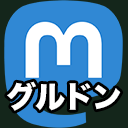
<style>
.page{position:relative;width:128px;height:128px;background:#3088d4}
.page>*{position:absolute;margin:0}
.t1{font:30px "HiraKakuStdN-W8";letter-spacing:-0.05em;color:#ffffff}
</style>
<div class="page">
<p class="t1" style="left:7px;top:81px;width:114px;height:30px">グルドン</p>
</div>
